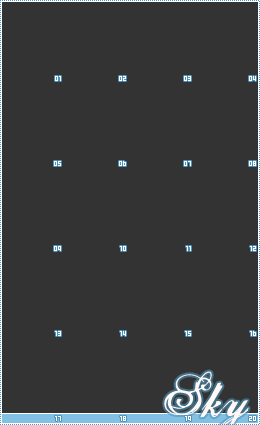
<style>
.page{position:relative;width:260px;height:425px;background:#333333}
.page>*{position:absolute;margin:0}
.t1{font:8px "pixmash";color:#ffffff}
</style>
<div class="page">
<p class="t1" style="left:55px;top:76px;width:6px;height:5px">01</p>
<p class="t1" style="left:119px;top:76px;width:7px;height:5px">02</p>
<p class="t1" style="left:184px;top:76px;width:7px;height:5px">03</p>
<p class="t1" style="left:249px;top:76px;width:7px;height:5px">04</p>
<p class="t1" style="left:54px;top:161px;width:7px;height:5px">05</p>
<p class="t1" style="left:119px;top:161px;width:7px;height:5px">06</p>
<p class="t1" style="left:184px;top:161px;width:7px;height:5px">07</p>
<p class="t1" style="left:249px;top:161px;width:7px;height:5px">08</p>
<p class="t1" style="left:54px;top:246px;width:7px;height:5px">09</p>
<p class="t1" style="left:120px;top:246px;width:6px;height:5px">10</p>
<p class="t1" style="left:186px;top:246px;width:5px;height:5px">11</p>
<p class="t1" style="left:250px;top:246px;width:6px;height:5px">12</p>
<p class="t1" style="left:55px;top:331px;width:6px;height:5px">13</p>
<p class="t1" style="left:120px;top:331px;width:6px;height:5px">14</p>
<p class="t1" style="left:185px;top:331px;width:6px;height:5px">15</p>
<p class="t1" style="left:250px;top:331px;width:6px;height:5px">16</p>
<p class="t1" style="left:55px;top:416px;width:6px;height:5px">17</p>
<p class="t1" style="left:120px;top:416px;width:6px;height:5px">18</p>
<p class="t1" style="left:185px;top:416px;width:6px;height:5px">19</p>
<p class="t1" style="left:249px;top:416px;width:7px;height:5px">20</p>
</div>
